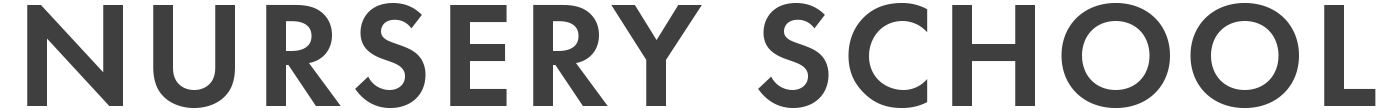
<style>
.page{position:relative;width:1400px;height:111px;background:#ffffff}
.page>*{position:absolute;margin:0}
.t1{font:152.1px "FuturaPT-Demi";letter-spacing:0.05em;color:#3f3f3f}
</style>
<div class="page">
<p class="t1" style="left:27px;top:3px;width:1349px;height:106px">NURSERY SCHOOL</p>
</div>
